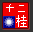
<style>
.page{position:relative;width:33px;height:32px;background:#f20000}
.page>*{position:absolute;margin:0}
.t1{font:10.4px "SimSun";color:#ffffff}
.t2{font:11.7px "SimSun";color:#ffffff}
</style>
<div class="page">
<p class="t1" style="left:6px;top:4px;width:19px;height:8px">十二</p>
<p class="t2" style="left:16px;top:15px;width:11px;height:12px">桂</p>
</div>
